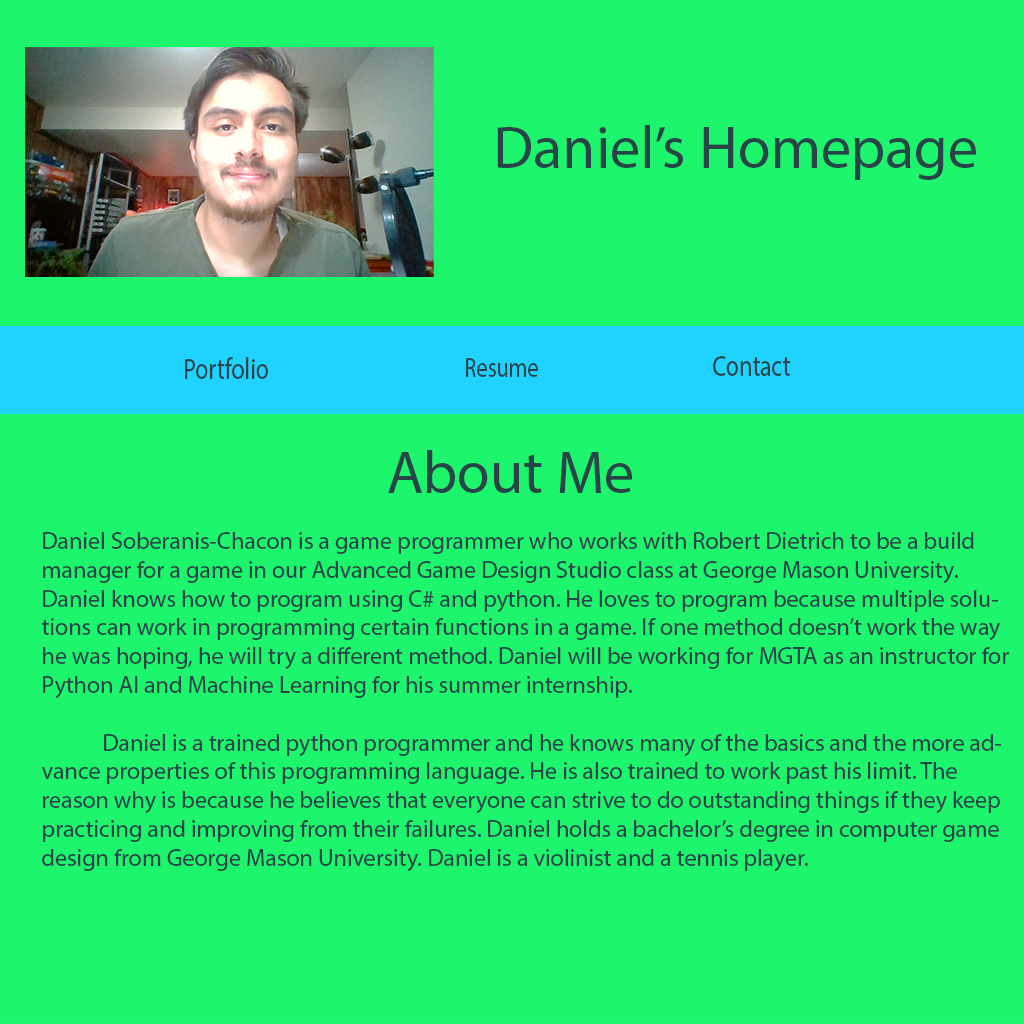
<style>
.page{position:relative;width:1024px;height:1024px;background:#1df56d}
.page>*{position:absolute;margin:0}
.t1{font:60px "MyriadPro-Regular";color:#274448}
.t2{font:29.8px "MyriadPro-Regular";color:#274448;scale:0.8 1}
.t3{font:28.3px "MyriadPro-Regular";color:#274448;scale:0.79 1}
.t4{font:24px "MyriadPro-Regular";color:#274448}
</style>
<div class="page">
<p class="t1" style="left:497px;top:125px;width:479px;height:55px">Daniel’s Homepage</p>
<p class="t2" style="left:185px;top:357px;width:83px;height:22px">Portfolio</p>
<p class="t3" style="left:466px;top:358px;width:72px;height:19px">Resume</p>
<p class="t2" style="left:713px;top:356px;width:77px;height:20px">Contact</p>
<p class="t1" style="left:388px;top:450px;width:244px;height:43px">About Me</p>
<p class="t4" style="left:41px;top:532px;width:968px;height:339px">Daniel Soberanis-Chacon is a game programmer who works with Robert Dietrich to be a build manager for a game in our Advanced Game Design Studio class at George Mason University. Daniel knows how to program using C# and python. He loves to program because multiple solutions can work in programming certain functions in a game. If one method doesn’t work the way he was hoping, he will try a different method. Daniel will be working for MGTA as an instructor for Python AI and Machine Learning for his summer internship.<br><br>            Daniel is a trained python programmer and he knows many of the basics and the more advance properties of this programming language. He is also trained to work past his limit. The reason why is because he believes that everyone can strive to do outstanding things if they keep practicing and improving from their failures. Daniel holds a bachelor’s degree in computer game design from George Mason University. Daniel is a violinist and a tennis player.</p>
</div>
